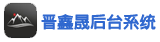
<style>
.page{position:relative;width:160px;height:42px;background:#ffffff}
.page>*{position:absolute;margin:0}
.t1{font:16px "AdobeFanHeitiStd-Bold";color:#3068cf;text-transform:uppercase;font-weight:bold}
</style>
<div class="page">
<p class="t1" style="left:41px;top:13px;width:115px;height:17px">晋鑫晟后台系统</p>
</div>
